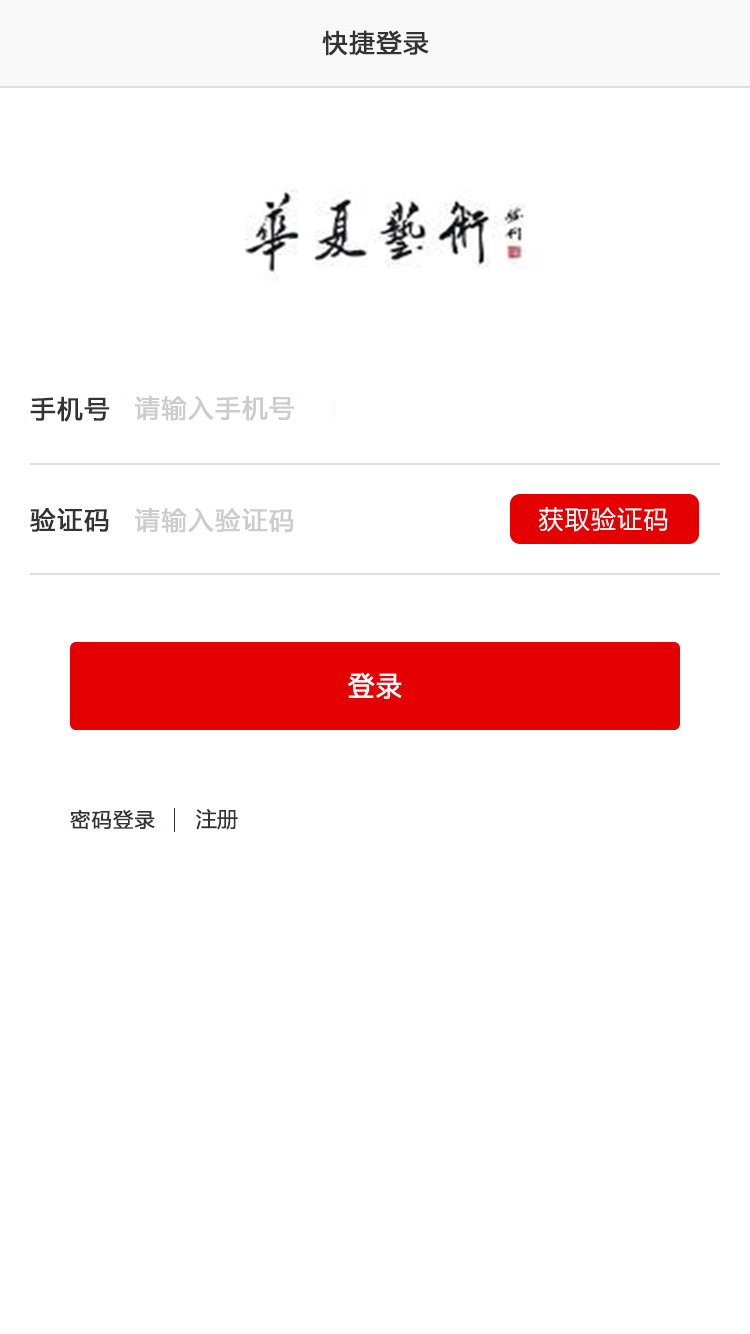
<style>
.page{position:relative;width:750px;height:1334px;background:#ffffff}
.page>*{position:absolute;margin:0}
.t1{font:25px "MicrosoftYaHei";letter-spacing:0.05em;color:#333333;font-weight:bold}
.t2{font:25px "MicrosoftYaHei";letter-spacing:0.05em;color:#cccccc;font-weight:bold}
.t3{font:25px "MicrosoftYaHei";letter-spacing:0.05em;color:#ffffff}
.t4{font:20px "MicrosoftYaHei";letter-spacing:0.05em;color:#333333;font-weight:bold}
</style>
<div class="page">
<p class="t1" style="left:322px;top:30px;width:107px;height:26px">快捷登录</p>
<p class="t1" style="left:30px;top:396px;width:80px;height:26px">手机号</p>
<p class="t2" style="left:134px;top:395px;width:160px;height:26px">请输入手机号</p>
<p class="t1" style="left:30px;top:508px;width:79px;height:24px">验证码</p>
<p class="t2" style="left:134px;top:507px;width:160px;height:26px">请输入验证码</p>
<p class="t3" style="left:538px;top:507px;width:130px;height:25px">获取验证码</p>
<p class="t4" style="left:70px;top:809px;width:85px;height:21px">密码登录</p>
</div>
